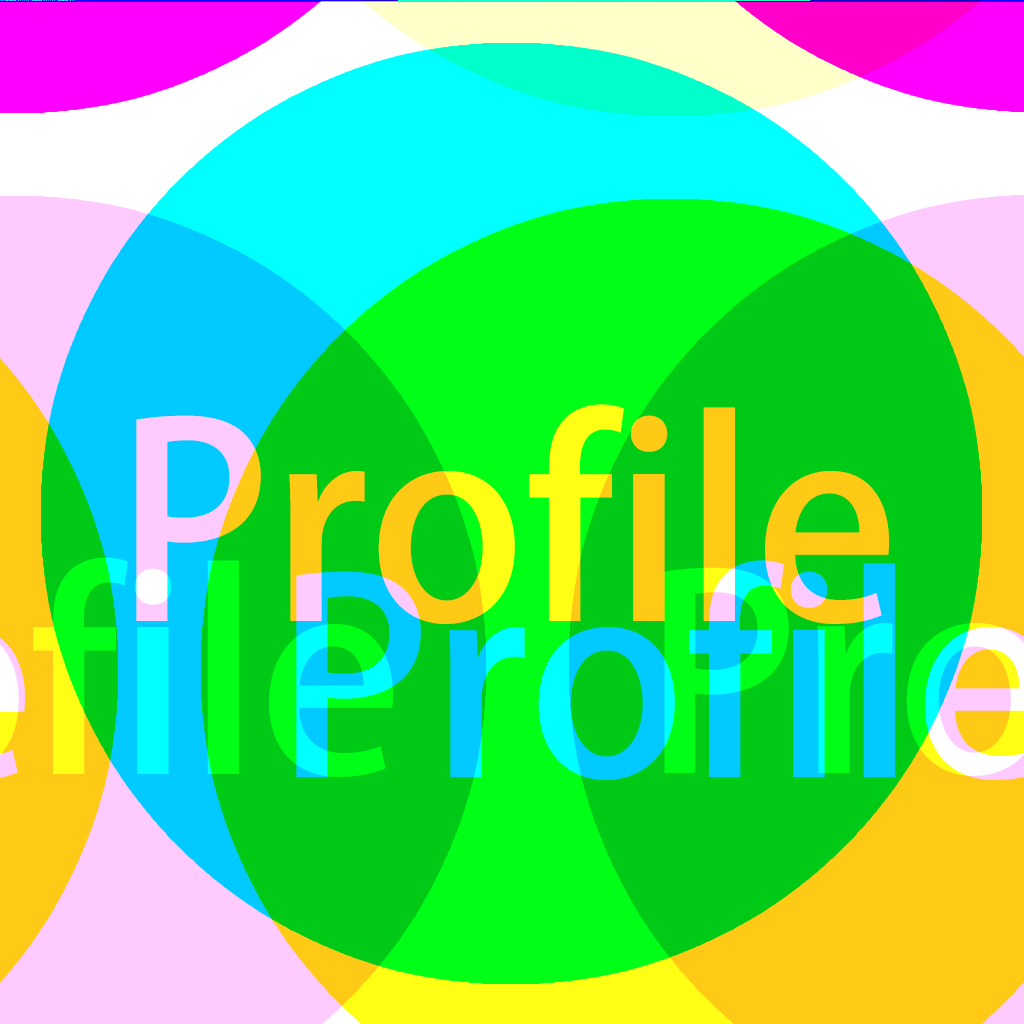
<style>
.page{position:relative;width:1024px;height:1024px;background:#00ca16}
.page>*{position:absolute;margin:0}
.t1{font:266px "AdobeHeitiStd-Regular"}
</style>
<div class="page">
<p class="t1" style="left:136px;top:402px;width:753px;height:220px">Profile</p>
</div>
